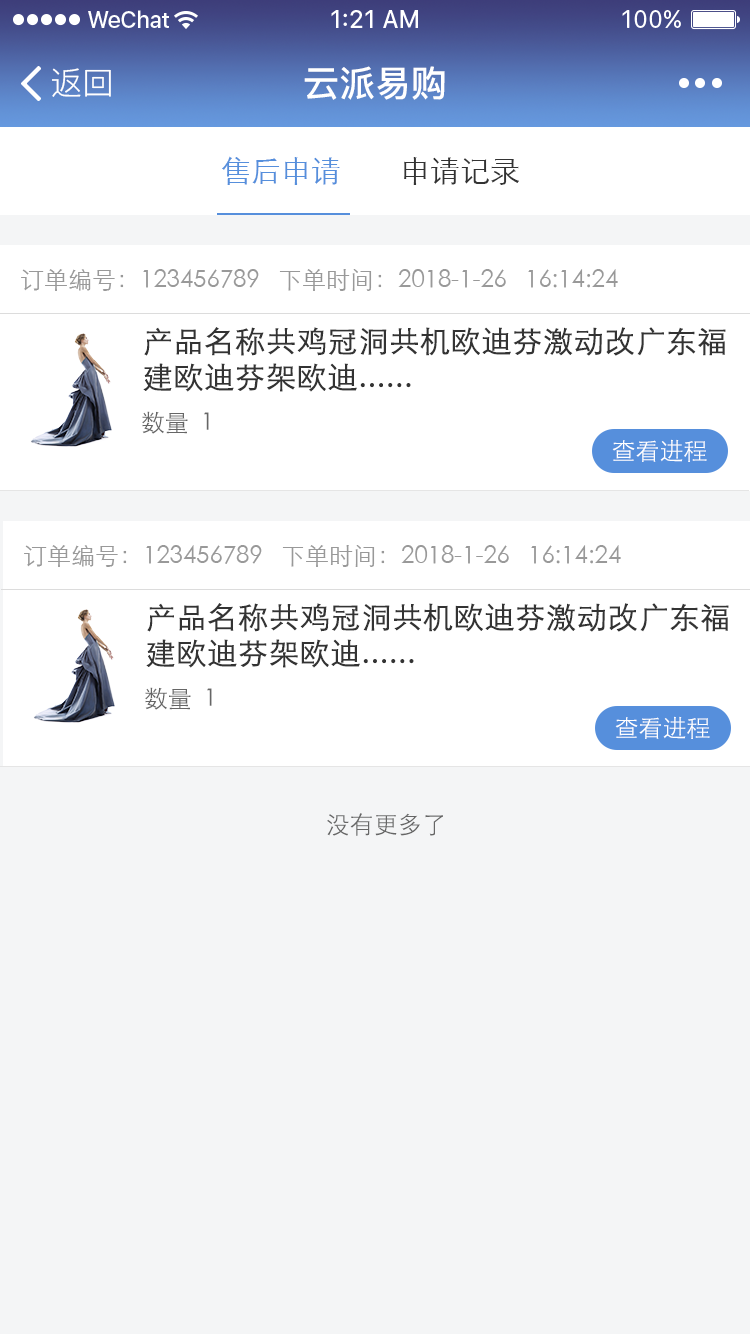
<style>
.page{position:relative;width:750px;height:1334px;background:#f4f5f6}
.page>*{position:absolute;margin:0}
.t1{font:32px "PingFang-SC-Regular";color:#ffffff}
.t2{font:36px "PingFang-SC-Bold";color:#ffffff}
.t3{font:30px "STXihei";color:#568fdc}
.t4{font:30px "STXihei";color:#333333}
.t5{font:24px "STXihei";color:#999999}
.t6{font:30px "STXihei";color:#333333;font-weight:bold}
.t7{font:24px "STXihei";color:#666666}
.t8{font:24px "STXihei";color:#ffffff}
</style>
<div class="page">
<p class="t1" style="left:52px;top:68px;width:59px;height:29px">返回</p>
<p class="t2" style="left:304px;top:66px;width:141px;height:34px">云派易购</p>
<p class="t3" style="left:222px;top:156px;width:118px;height:29px">售后申请</p>
<p class="t4" style="left:404px;top:157px;width:115px;height:28px">申请记录</p>
<p class="t5" style="left:21px;top:269px;width:238px;height:22px">订单编号：123456789</p>
<p class="t5" style="left:279px;top:269px;width:339px;height:22px">下单时间：2018-1-26   16:14:24</p>
<p class="t6" style="left:143px;top:327px;width:583px;height:65px">产品名称共鸡冠洞共机欧迪芬激动改广东福建欧迪芬架欧迪......</p>
<p class="t7" style="left:142px;top:411px;width:67px;height:23px">数量  1</p>
<p class="t8" style="left:612px;top:439px;width:95px;height:23px">查看进程</p>
<p class="t5" style="left:24px;top:545px;width:238px;height:22px">订单编号：123456789</p>
<p class="t5" style="left:282px;top:545px;width:339px;height:22px">下单时间：2018-1-26   16:14:24</p>
<p class="t6" style="left:146px;top:603px;width:583px;height:65px">产品名称共鸡冠洞共机欧迪芬激动改广东福建欧迪芬架欧迪......</p>
<p class="t7" style="left:145px;top:687px;width:67px;height:23px">数量  1</p>
<p class="t8" style="left:615px;top:716px;width:95px;height:23px">查看进程</p>
<p class="t7" style="left:327px;top:813px;width:116px;height:23px">没有更多了</p>
</div>
